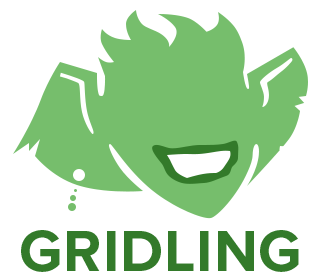
<style>
.page{position:relative;width:320px;height:280px;background:#ffffff}
.page>*{position:absolute;margin:0}
.t1{font:60px "ProximaNova-Bold";letter-spacing:0.015em;color:#337a2a}
</style>
<div class="page">
<p class="t1" style="left:21px;top:230px;width:278px;height:42px">GRIDLING</p>
</div>
